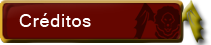
<style>
.page{position:relative;width:211px;height:45px;background:#650600}
.page>*{position:absolute;margin:0}
.t1{font:18px "MicrosoftSansSerif";letter-spacing:0.04em;color:#ffffff}
</style>
<div class="page">
<p class="t1" style="left:19px;top:13px;width:72px;height:14px">Créditos</p>
</div>
